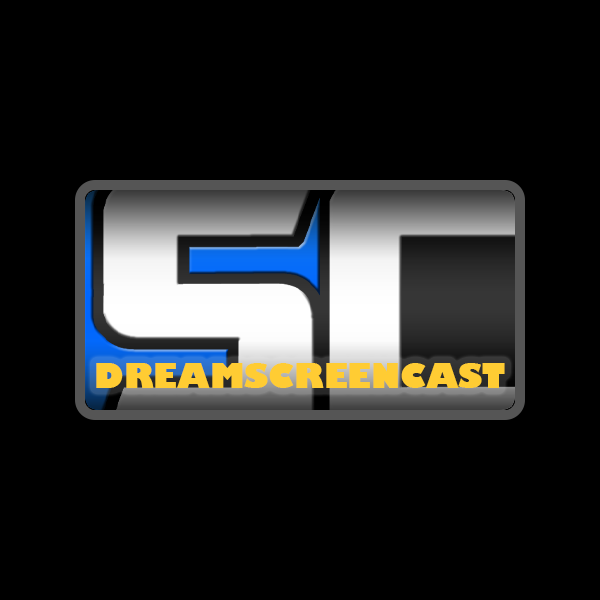
<style>
.page{position:relative;width:600px;height:600px;background:#000000}
.page>*{position:absolute;margin:0}
.t1{font:33px "GillSans-UltraBold";color:#ffcc33}
</style>
<div class="page">
<p class="t1" style="left:96px;top:363px;width:409px;height:25px">DREAMSCREENCAST</p>
</div>
